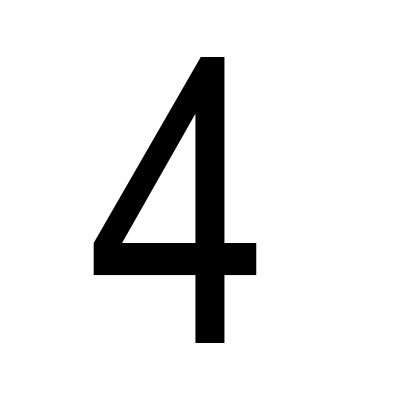
<style>
.page{position:relative;width:400px;height:400px;background:#ffffff}
.page>*{position:absolute;margin:0}
.t1{font:400px "ArialNarrow";color:#000000}
</style>
<div class="page">
<p class="t1" style="left:93px;top:57px;width:164px;height:286px">4</p>
</div>
